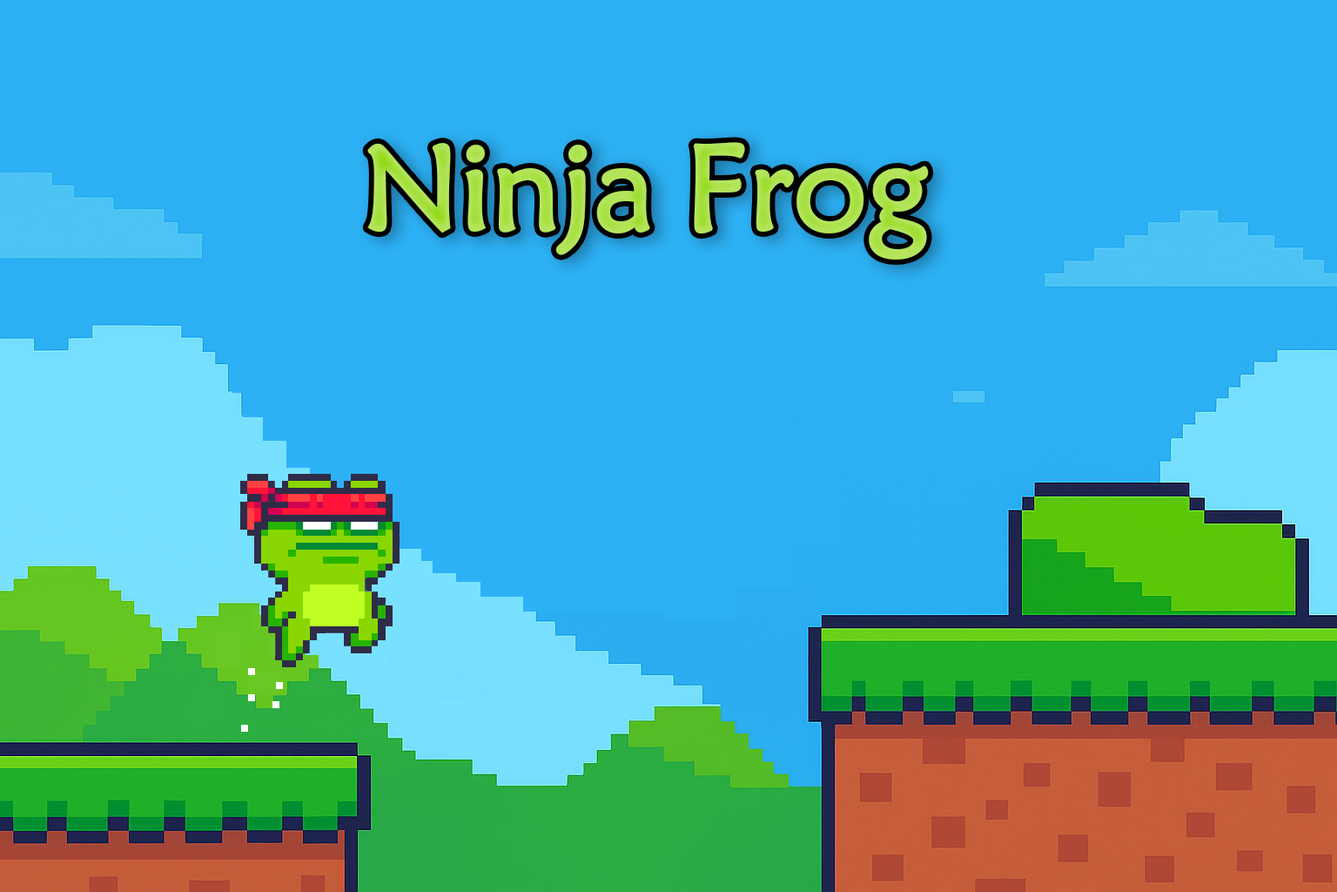
<style>
.page{position:relative;width:1337px;height:892px}
.page>*{position:absolute;margin:0}
.t1{font:121px "STXinwei";letter-spacing:-0.02em;color:#afe352;font-weight:bold}
</style>
<div class="page">
<p class="t1" style="left:367px;top:142px;width:562px;height:117px">Ninja Frog</p>
</div>
